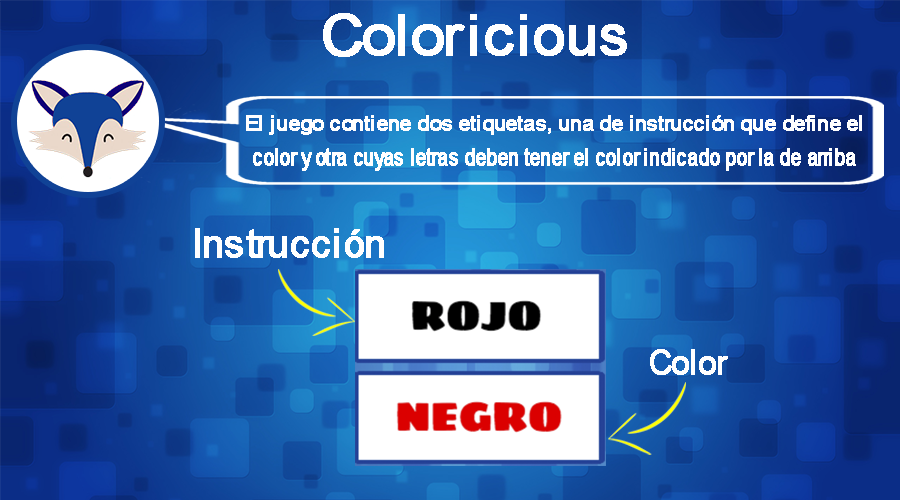
<style>
.page{position:relative;width:900px;height:500px}
.page>*{position:absolute;margin:0}
.t1{font:56.9px "ArialMT";color:#ffffff;font-weight:bold;scale:1.07 1}
.t2{font:56.9px "ArialMT";color:#ffffff;font-weight:bold}
.t3{font:19.9px "ArialMT";color:#ffffff;font-weight:bold;scale:1.1 1}
.t4{font:22.9px "ArialMT";color:#ffffff;font-weight:bold;scale:0.89 1}
.t5{font:40.2px "ArialMT";color:#ffffff;font-weight:bold}
.t6{font:33.5px "ArialMT";color:#ffffff;font-weight:bold}
</style>
<div class="page">
<p class="t1" style="left:323px;top:13px;width:142px;height:44px">Color</p>
<p class="t2" style="left:470px;top:14px;width:157px;height:42px">icious</p>
<p class="t3" style="left:246px;top:115px;width:616px;height:20px">El juego contiene dos etiquetas, una de instrucción que define el</p>
<p class="t4" style="left:253px;top:148px;width:603px;height:23px">color y otra cuyas letras deben tener el color indicado por la de arriba</p>
<p class="t5" style="left:195px;top:228px;width:189px;height:30px">Instrucción</p>
<p class="t6" style="left:650px;top:349px;width:78px;height:26px">Color</p>
</div>
